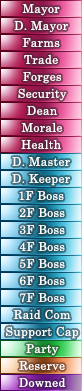
<style>
.page{position:relative;width:84px;height:391px}
.page>*{position:absolute;margin:0}
.t1{font:12px "CenturySchoolbook";letter-spacing:0.025em;color:#ffffff}
</style>
<div class="page">
<p class="t1" style="left:22px;top:4px;width:38px;height:12px">Mayor</p>
<p class="t1" style="left:14px;top:21px;width:54px;height:12px">D. Mayor</p>
<p class="t1" style="left:22px;top:38px;width:38px;height:9px">Farms</p>
<p class="t1" style="left:24px;top:54px;width:34px;height:10px">Trade</p>
<p class="t1" style="left:23px;top:72px;width:38px;height:12px">Forges</p>
<p class="t1" style="left:18px;top:88px;width:49px;height:13px">Security</p>
<p class="t1" style="left:27px;top:106px;width:30px;height:9px">Dean</p>
<p class="t1" style="left:21px;top:122px;width:41px;height:10px">Morale</p>
<p class="t1" style="left:21px;top:139px;width:40px;height:10px">Health</p>
<p class="t1" style="left:12px;top:157px;width:58px;height:9px">D. Master</p>
<p class="t1" style="left:12px;top:174px;width:58px;height:12px">D. Keeper</p>
<p class="t1" style="left:19px;top:191px;width:45px;height:9px">1F Boss</p>
<p class="t1" style="left:19px;top:208px;width:46px;height:9px">2F Boss</p>
<p class="t1" style="left:20px;top:225px;width:45px;height:9px">3F Boss</p>
<p class="t1" style="left:19px;top:242px;width:46px;height:9px">4F Boss</p>
<p class="t1" style="left:20px;top:259px;width:45px;height:9px">5F Boss</p>
<p class="t1" style="left:19px;top:276px;width:46px;height:9px">6F Boss</p>
<p class="t1" style="left:20px;top:293px;width:45px;height:9px">7F Boss</p>
<p class="t1" style="left:13px;top:309px;width:58px;height:10px">Raid Com</p>
<p class="t1" style="left:6px;top:326px;width:73px;height:13px">Support Cap</p>
<p class="t1" style="left:26px;top:344px;width:33px;height:12px">Party</p>
<p class="t1" style="left:19px;top:361px;width:46px;height:9px">Reserve</p>
<p class="t1" style="left:19px;top:377px;width:47px;height:10px">Downed</p>
</div>
